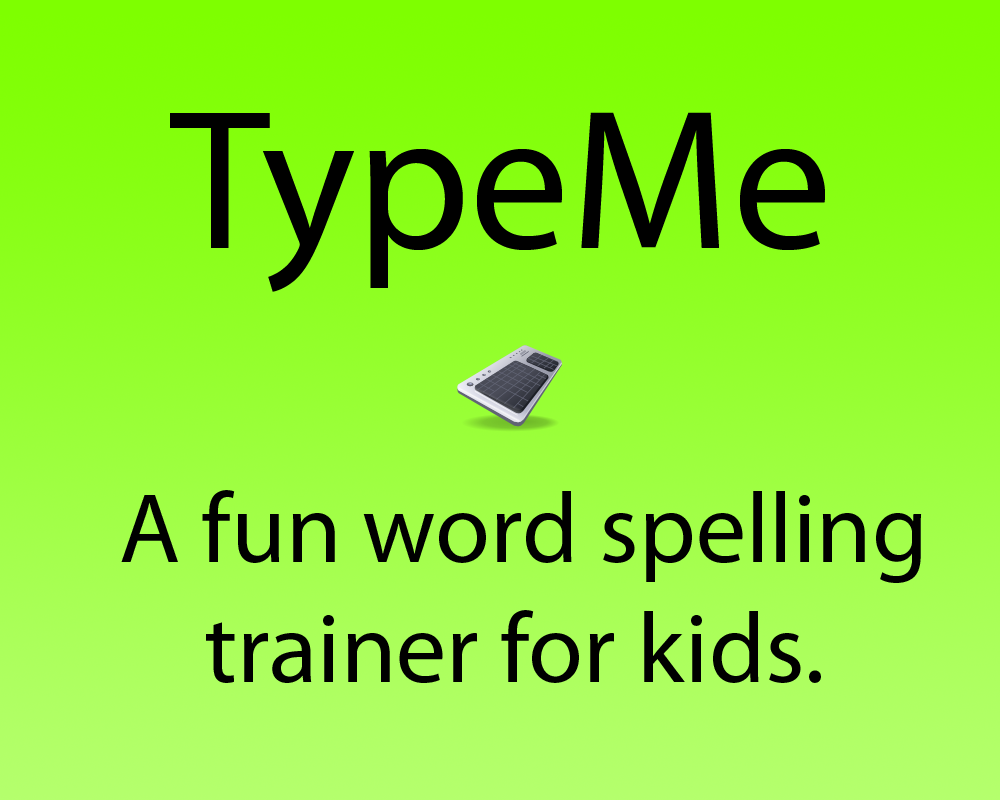
<style>
.page{position:relative;width:1000px;height:800px}
.page>*{position:absolute;margin:0}
.t1{font:200px "MyriadPro-Regular";color:#000000}
.t2{font:100px "MyriadPro-Regular";color:#000000}
</style>
<div class="page">
<p class="t1" style="left:170px;top:112px;width:655px;height:180px">TypeMe</p>
<p class="t2" style="left:121px;top:490px;width:801px;height:193px">A fun word spelling<br>    trainer for kids.</p>
</div>
